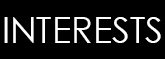
<style>
.page{position:relative;width:165px;height:59px;background:#000000}
.page>*{position:absolute;margin:0}
.t1{font:36px "CenturyGothic";color:#ffffff}
</style>
<div class="page">
<p class="t1" style="left:4px;top:17px;width:157px;height:26px">INTERESTSS</p>
</div>
